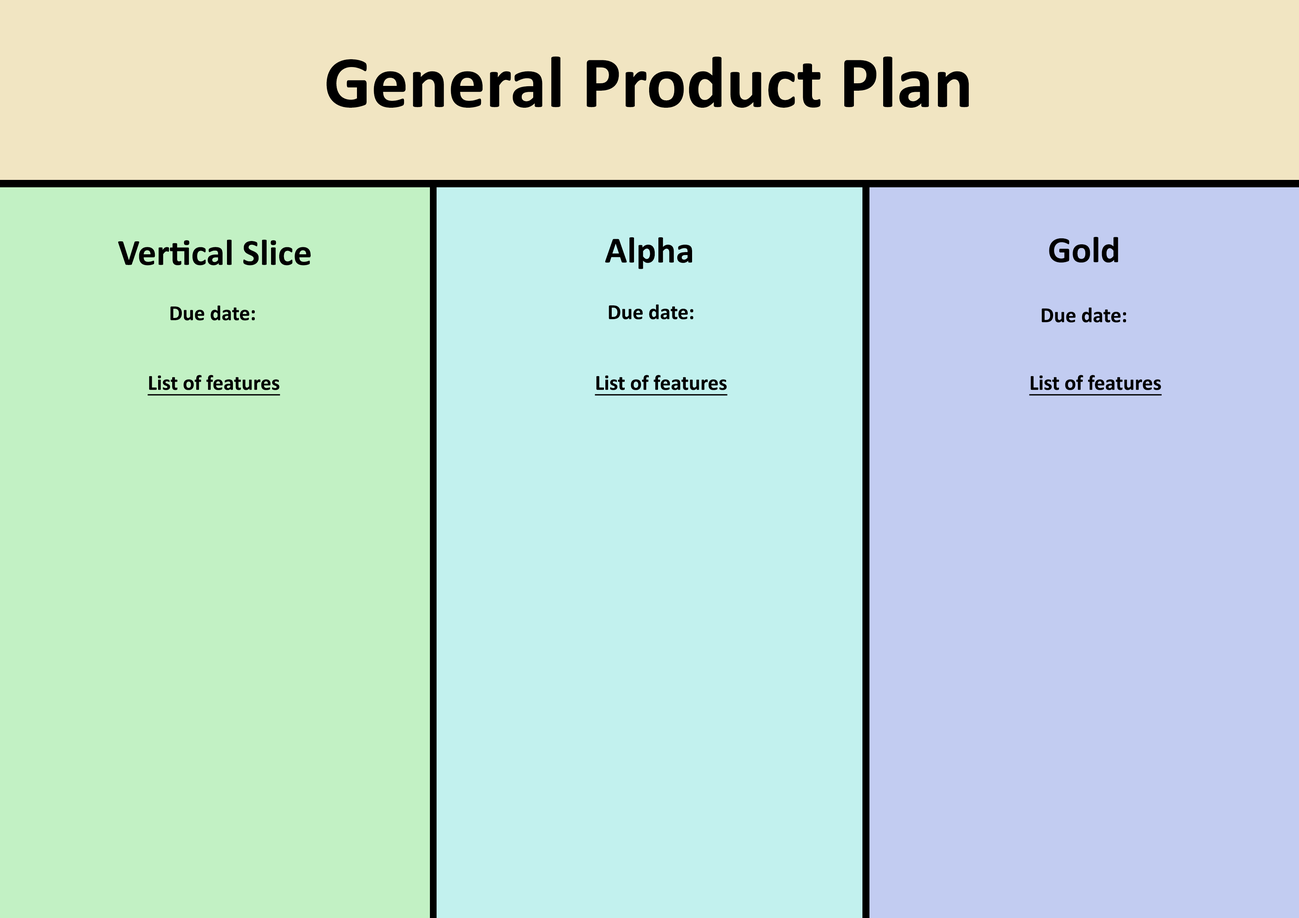
<style>
.page{position:relative;width:1299px;height:918px;background:#c2ccf1}
.page>*{position:absolute;margin:0}
.t1{font:74px "Calibri-Bold";color:#000000}
.t2{font:37px "Calibri-Bold";color:#000000}
.t3{font:21.6px "Calibri-Bold";color:#000000}
.t4{font:21.6px "Calibri-Bold";color:#000000;text-decoration:underline}
</style>
<div class="page">
<p class="t1" style="left:327px;top:56px;width:642px;height:52px">General Product Plan</p>
<p class="t2" style="left:118px;top:240px;width:193px;height:25px">Vertical Slice</p>
<p class="t2" style="left:605px;top:237px;width:87px;height:32px">Alpha</p>
<p class="t2" style="left:1049px;top:237px;width:69px;height:26px">Gold</p>
<p class="t3" style="left:170px;top:305px;width:85px;height:16px">Due date:</p>
<p class="t3" style="left:609px;top:304px;width:84px;height:16px">Due date:</p>
<p class="t3" style="left:1041px;top:307px;width:85px;height:15px">Due date:</p>
<p class="t4" style="left:147px;top:375px;width:133px;height:21px">List of features</p>
<p class="t4" style="left:595px;top:375px;width:132px;height:21px">List of features</p>
<p class="t4" style="left:1029px;top:375px;width:132px;height:21px">List of features</p>
</div>
